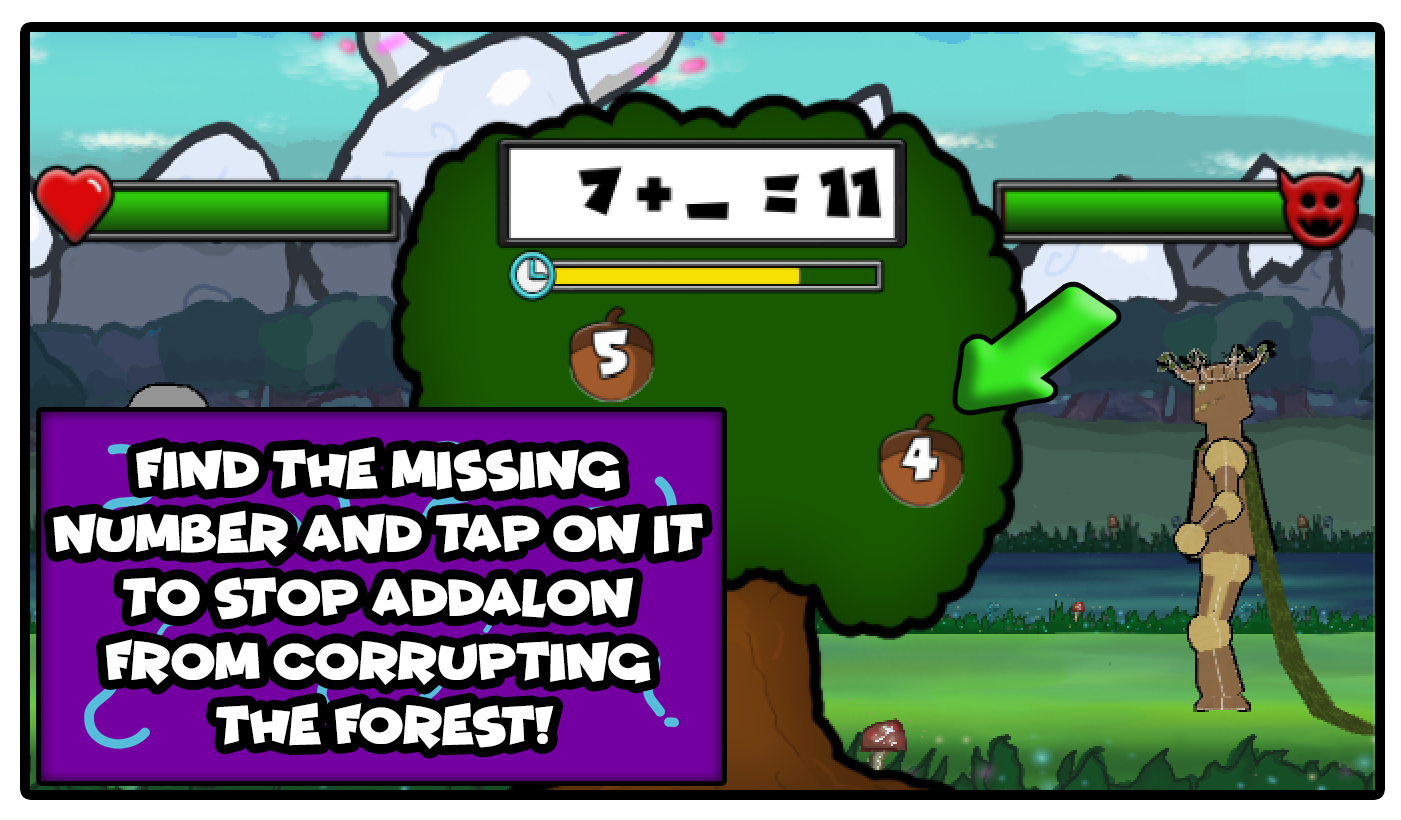
<style>
.page{position:relative;width:1401px;height:820px}
.page>*{position:absolute;margin:0}
.t1{font:53.3px "Funhouse";color:#ffffff}
</style>
<div class="page">
<p class="t1" style="left:53px;top:446px;width:650px;height:303px;text-align:center">FIND tHE MISSING <br>NUMBER AND TAP ON IT <br>TO STOP ADDALON <br>FROM CORRUPTING <br>THE FOREST!</p>
</div>
